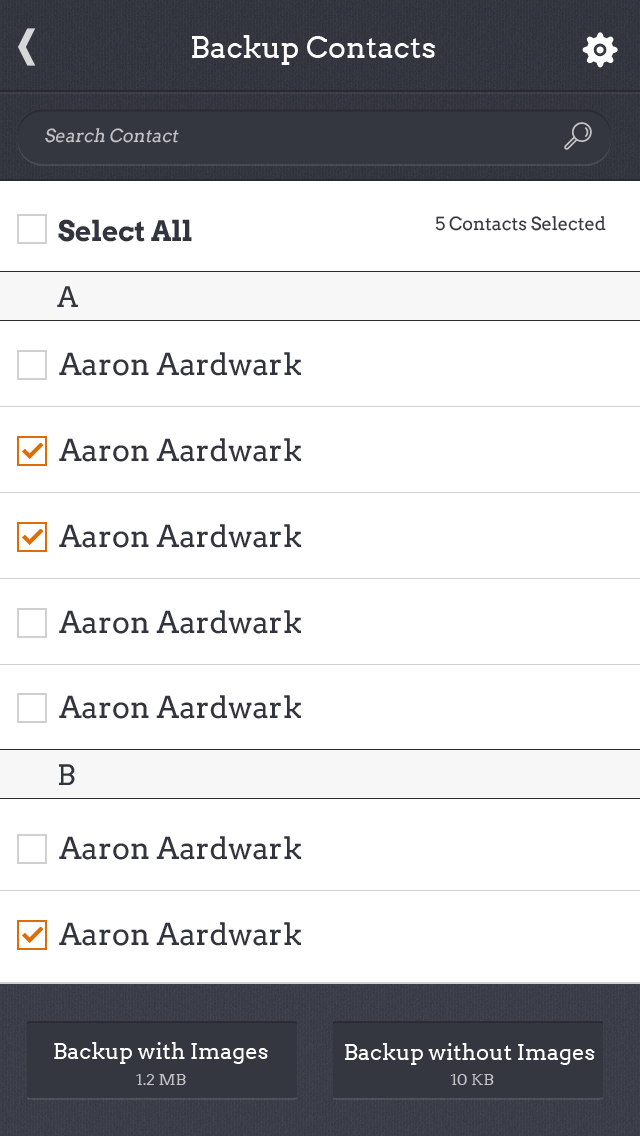
<style>
.page{position:relative;width:640px;height:1136px;background:#ffffff}
.page>*{position:absolute;margin:0}
.t1{font:30px "Arvo";color:#ffffff}
.t2{font:18px "Arvo";color:#c4c4c7;font-style:italic}
.t3{font:28px "Arvo-Bold";color:#32343e}
.t4{font:18px "Arvo";color:#353741}
.t5{font:28px "Arvo";color:#32343e}
.t6{font:30px "Arvo";color:#32343e}
.t7{font:22px "Arvo";color:#ffffff}
.t8{font:16px "Arvo";color:#c4c4c7}
</style>
<div class="page">
<p class="t1" style="left:192px;top:35px;width:243px;height:30px">Backup Contacts</p>
<p class="t2" style="left:45px;top:128px;width:134px;height:15px">Search Contact</p>
<p class="t3" style="left:58px;top:219px;width:134px;height:23px">Select All</p>
<p class="t4" style="left:436px;top:216px;width:170px;height:15px">5 Contacts Selected</p>
<p class="t5" style="left:57px;top:286px;width:21px;height:21px">A</p>
<p class="t6" style="left:59px;top:352px;width:242px;height:24px">Aaron Aardwark</p>
<p class="t6" style="left:59px;top:438px;width:242px;height:24px">Aaron Aardwark</p>
<p class="t6" style="left:59px;top:524px;width:242px;height:24px">Aaron Aardwark</p>
<p class="t6" style="left:59px;top:610px;width:242px;height:24px">Aaron Aardwark</p>
<p class="t6" style="left:59px;top:695px;width:242px;height:24px">Aaron Aardwark</p>
<p class="t5" style="left:59px;top:764px;width:16px;height:21px">B</p>
<p class="t6" style="left:59px;top:836px;width:242px;height:24px">Aaron Aardwark</p>
<p class="t6" style="left:59px;top:922px;width:242px;height:24px">Aaron Aardwark</p>
<p class="t7" style="left:54px;top:1042px;width:214px;height:22px">Backup with Images</p>
<p class="t7" style="left:345px;top:1043px;width:250px;height:22px">Backup without Images</p>
<p class="t8" style="left:136px;top:1074px;width:50px;height:11px">1.2 MB</p>
<p class="t8" style="left:450px;top:1074px;width:44px;height:11px">10 KB</p>
</div>
